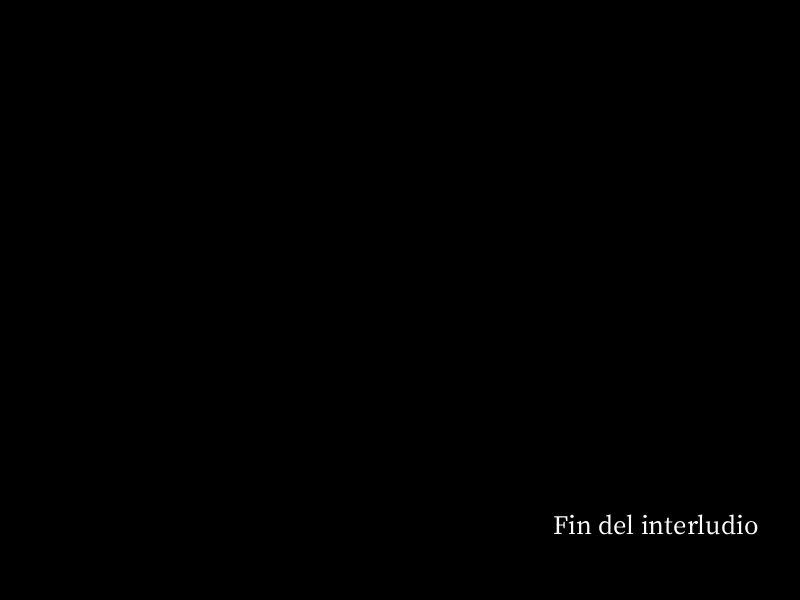
<style>
.page{position:relative;width:800px;height:600px;background:#000000}
.page>*{position:absolute;margin:0}
.t1{font:29px "OfficialFateFont-Medium";color:#ffffff}
</style>
<div class="page">
<p class="t1" style="left:554px;top:514px;width:204px;height:21px">Fin del interludio</p>
</div>
